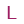
<style>
.page{position:relative;width:24px;height:24px;background:#ffffff}
.page>*{position:absolute;margin:0}
.t1{font:18px "HelveticaNeue";color:#9e1e62}
</style>
<div class="page">
<p class="t1" style="left:7px;top:6px;width:10px;height:13px">L</p>
</div>
